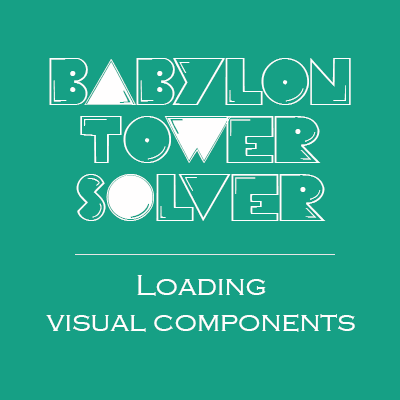
<style>
.page{position:relative;width:400px;height:400px;background:#16a085}
.page>*{position:absolute;margin:0}
.t1{font:48px "PacFont";color:#fffefe}
.t2{font:30px "CopperplateGothic-Light";color:#fffefe}
</style>
<div class="page">
<p class="t1" style="left:49px;top:58px;width:302px;height:163px;text-align:center">BaBYLON<br>TOwER<br>SoLVER</p>
<p class="t2" style="left:46px;top:275px;width:309px;height:57px;text-align:center">Loading<br>visual components</p>
</div>
